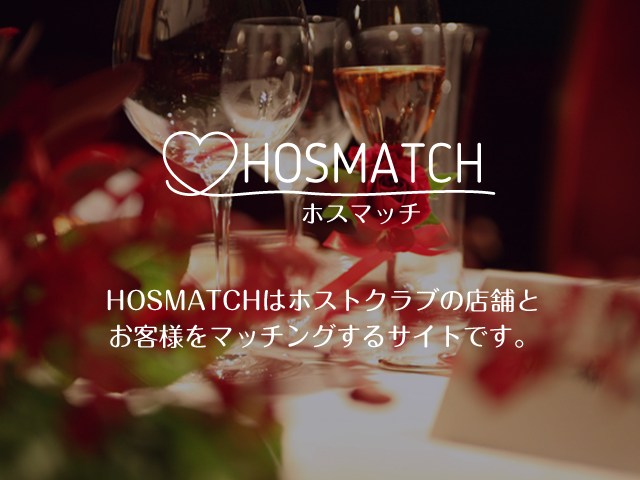
<style>
.page{position:relative;width:640px;height:480px}
.page>*{position:absolute;margin:0}
.t1{font:25.4px/36.7px "MaruFoPro-Medium";color:#ffffff}
</style>
<div class="page">
<p class="t1" style="left:107px;top:287px;width:430px;height:62px;text-align:center">HOSMATCHはホストクラブの店舗と<br>お客様をマッチングするサイトです。</p>
</div>
